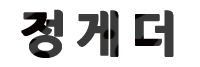
<style>
.page{position:relative;width:200px;height:67px;background:#ffffff}
.page>*{position:absolute;margin:0}
.t1{font:56.1px "YiSunShinDotumB";letter-spacing:0.12em;color:#3b3b3b;font-weight:bold}
</style>
<div class="page">
<p class="t1" style="left:21px;top:9px;width:153px;height:49px">정게더</p>
</div>
